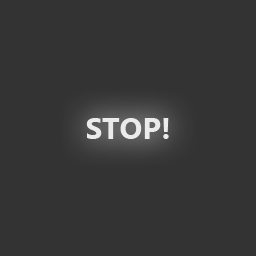
<style>
.page{position:relative;width:256px;height:256px;background:#333333}
.page>*{position:absolute;margin:0}
.t1{font:30px "MicrosoftTaiLe-Bold";color:#ebebeb}
</style>
<div class="page">
<p class="t1" style="left:86px;top:118px;width:83px;height:21px">STOP!</p>
</div>
